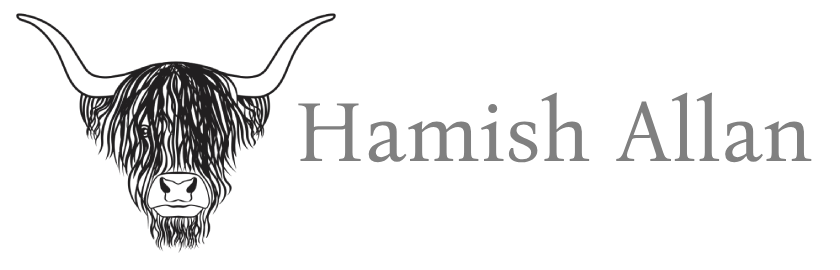
<style>
.page{position:relative;width:840px;height:270px;background:#ffffff}
.page>*{position:absolute;margin:0}
.t1{font:86.6px "BonaNova-Regular";color:#808080}
</style>
<div class="page">
<p class="t1" style="left:298px;top:92px;width:514px;height:71px">Hamish Allan</p>
</div>
